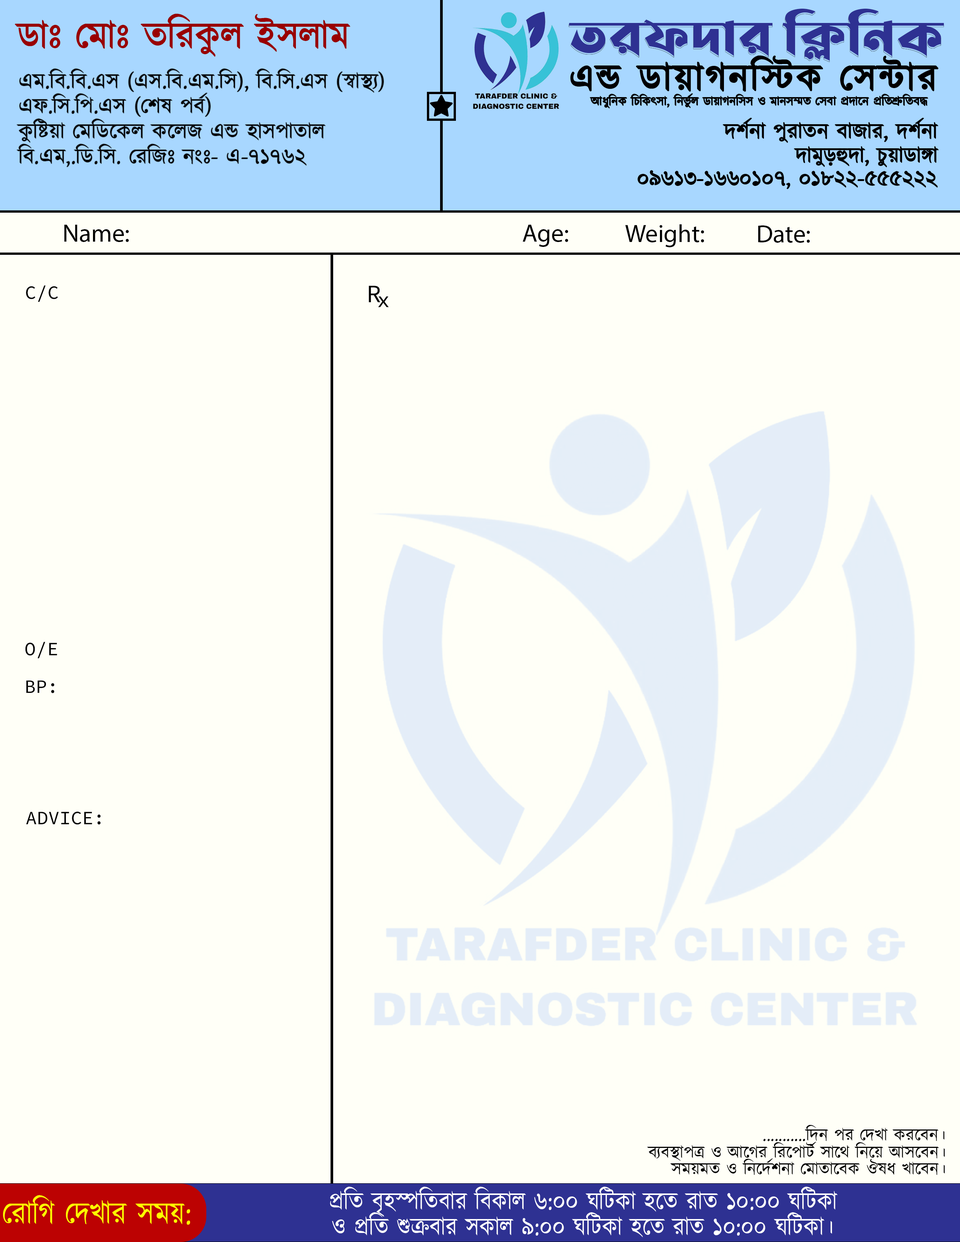
<style>
.page{position:relative;width:960px;height:1242px;background:#fffff7}
.page>*{position:absolute;margin:0}
.t1{font:37.6px "Kalpurush";color:#9a0000}
.t2{font:51px "LiSirajeeSheikhPlainUnicode";color:#2e3192}
.t3{font:37.6px "Kalpurush";letter-spacing:0.06em;color:#000000}
.t4{font:22px/25.1px "Kalpurush";color:#000000}
.t5{font:12.5px "Kalpurush";color:#000000}
.t6{font:22px "Kalpurush";color:#000000}
.t7{font:25.1px "MyriadPro-Regular";color:#000000}
.t8{font:18.8px "SourceCodePro-Regular";color:#000000}
.t9{font:25.1px "SourceCodePro-Regular";color:#000000}
.t10{font:22px "SourceCodePro-Regular";color:#000000}
.t11{font:17.3px "Kalpurush";color:#000000}
.t12{font:25.1px "Kalpurush";color:#ffffff;scale:0.91 1}
.t13{font:31.8px "Kalpurush";color:#fcff00;scale:0.91 1}
</style>
<div class="page">
<p class="t1" style="left:15px;top:14px;width:335px;height:42px">ডাঃ মোঃ তরিকুল ইসলাম</p>
<p class="t2" style="left:569px;top:9px;width:375px;height:52px">তরফদার ক্লিনিক</p>
<p class="t3" style="left:571px;top:56px;width:367px;height:35px">এন্ড ডায়াগনস্টিক সেন্টার</p>
<p class="t4" style="left:17px;top:69px;width:367px;height:98px">এম.বি.বি.এস (এস.বি.এম.সি), বি.সি.এস (স্বাস্থ্য)<br>এফ.সি.পি.এস (শেষ পর্ব)<br>কুষ্টিয়া মেডিকেল কলেজ এন্ড হাসপাতাল<br>বি.এম,.ডি.সি. রেজিঃ নংঃ- এ-৭১৭৬২</p>
<p class="t5" style="left:590px;top:94px;width:338px;height:14px">আধুনিক চিকিৎসা, নির্ভুল ডায়াগনসিস ও মানসম্মত সেবা প্রদানে প্রতিশ্রুতিবদ্ধ</p>
<p class="t6" style="left:723px;top:118px;width:215px;height:25px">দর্শনা পুরাতন বাজার, দর্শনা</p>
<p class="t6" style="left:794px;top:146px;width:144px;height:21px">দামুড়হুদা, চুয়াডাঙ্গা</p>
<p class="t6" style="left:638px;top:171px;width:299px;height:18px">০৯৬১৩-১৬৬০১০৭, ০১৮২২-৫৫৫২২২</p>
<p class="t7" style="left:64px;top:225px;width:65px;height:17px">Name:</p>
<p class="t7" style="left:522px;top:225px;width:46px;height:22px">Age:</p>
<p class="t7" style="left:625px;top:224px;width:79px;height:23px">Weight:</p>
<p class="t7" style="left:758px;top:225px;width:52px;height:18px">Date:</p>
<p class="t8" style="left:26px;top:285px;width:32px;height:17px">C/C</p>
<p class="t9" style="left:369px;top:286px;width:11px;height:16px">R</p>
<p class="t10" style="left:378px;top:296px;width:11px;height:12px">x</p>
<p class="t8" style="left:25px;top:642px;width:32px;height:16px">O/E</p>
<p class="t8" style="left:26px;top:681px;width:28px;height:12px">BP:</p>
<p class="t8" style="left:26px;top:812px;width:75px;height:13px">ADVICE:</p>
<p class="t11" style="left:763px;top:1125px;width:181px;height:16px">...........দিন পর দেখা করবেন।</p>
<p class="t11" style="left:647px;top:1142px;width:298px;height:19px">ব্যবস্থাপত্র ও আগের রিপোর্ট সাথে নিয়ে আসবেন।</p>
<p class="t11" style="left:670px;top:1159px;width:275px;height:16px">সময়মত ও নির্দেশনা মোতাবেক ঔষধ খাবেন।</p>
<p class="t12" style="left:330px;top:1187px;width:508px;height:30px">প্রতি বৃহস্পতিবার বিকাল ৬:০০ ঘটিকা হতে রাত ১০:০০ ঘটিকা</p>
<p class="t13" style="left:3px;top:1195px;width:187px;height:30px">রোগি দেখার সময়:</p>
<p class="t12" style="left:332px;top:1212px;width:500px;height:26px">ও প্রতি শুক্রবার সকাল ৯:০০ ঘটিকা হতে রাত ১০:০০ ঘটিকা।</p>
</div>
